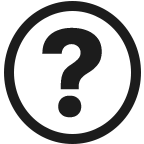
<style>
.page{position:relative;width:144px;height:144px;background:#ffffff}
.page>*{position:absolute;margin:0}
.t1{font:119.3px "Inter-ExtraBold";color:#1c1c1c}
</style>
<div class="page">
<p class="t1" style="left:42px;top:27px;width:60px;height:91px">?</p>
</div>
